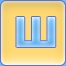
<style>
.page{position:relative;width:66px;height:66px}
.page>*{position:absolute;margin:0}
.t1{font:41px "Tahoma-Bold"}
</style>
<div class="page">
<p class="t1" style="left:15px;top:17px;width:40px;height:30px">Ш</p>
<p class="t1" style="left:16px;top:17px;width:40px;height:30px">Ш</p>
</div>
